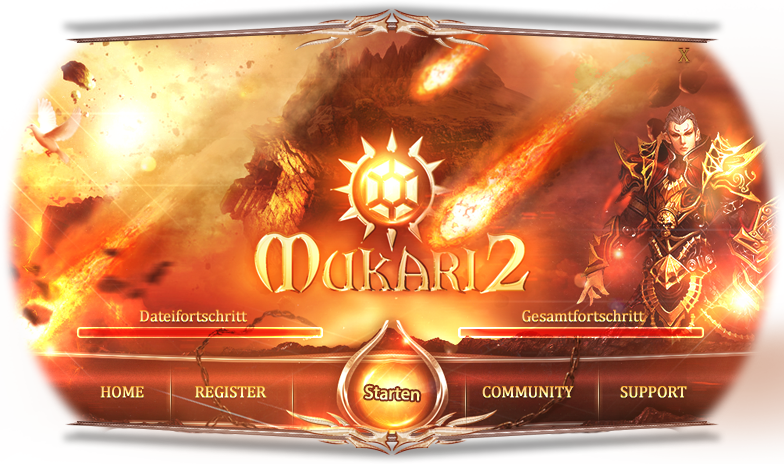
<style>
.page{position:relative;width:784px;height:464px}
.page>*{position:absolute;margin:0}
.t1{font:20px "CambriaMath";letter-spacing:-0.02em;font-weight:bold}
.t2{font:16px "CambriaMath";letter-spacing:-0.02em;font-weight:bold}
.t3{font:18px "MyriadPro-Regular";letter-spacing:-0.02em;font-weight:bold}
</style>
<div class="page">
<p class="t1" style="left:678px;top:47px;width:12px;height:15px">X</p>
<p class="t2" style="left:139px;top:309px;width:506px;height:13px">Dateifortschritt                        Gesamtfortschritt</p>
<p class="t2" style="left:100px;top:386px;width:44px;height:12px">HOME</p>
<p class="t2" style="left:195px;top:386px;width:72px;height:12px">REGISTER</p>
<p class="t3" style="left:365px;top:385px;width:55px;height:16px;rotate:2deg">Starten</p>
<p class="t2" style="left:482px;top:386px;width:92px;height:12px">COMMUNITY</p>
<p class="t2" style="left:620px;top:386px;width:67px;height:12px">SUPPORT</p>
</div>
